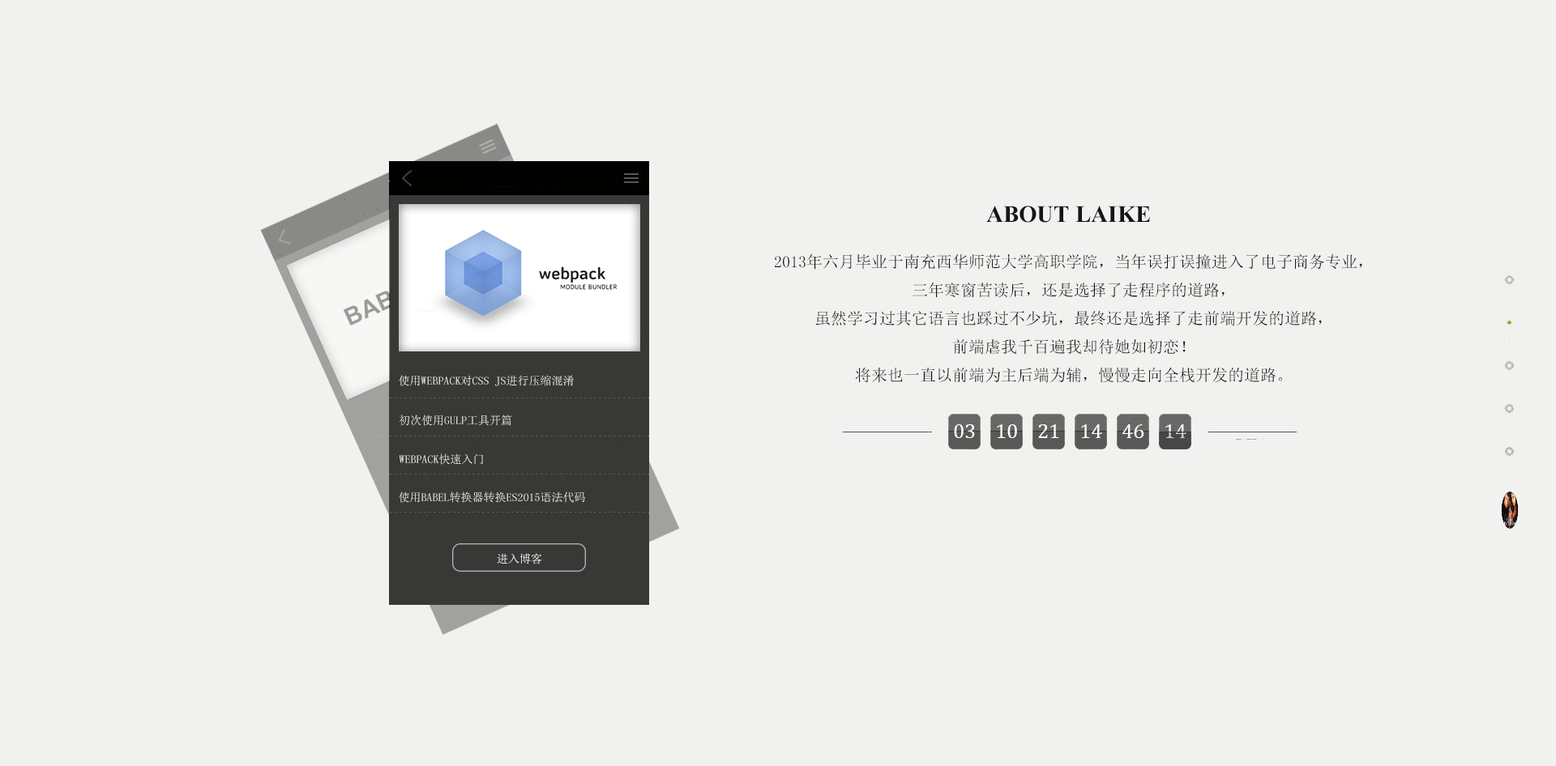
<style>
.page{position:relative;width:1556px;height:766px;background:#f1f1ef}
.page>*{position:absolute;margin:0}
.t1{font:29.2px "Aparajita-Bold";color:#161414;text-transform:uppercase}
.t2{font:16.2px "SimSun";color:#161414;text-transform:uppercase}
.t3{font:11.3px "SimSun";color:#f1f1ef;text-transform:uppercase}
.t4{font:11.3px "SimSun";color:#ffffff;text-transform:uppercase}
</style>
<div class="page">
<p class="t1" style="left:986px;top:206px;width:164px;height:17px">About Laike</p>
<p class="t2" style="left:775px;top:254px;width:587px;height:129px;text-align:center">2013年六月毕业于南充西华师范大学高职学院，当年误打误撞进入了电子商务专业，<br>三年寒窗苦读后，还是选择了走程序的道路，<br>虽然学习过其它语言也踩过不少坑，最终还是选择了走前端开发的道路，<br>前端虐我千百遍我却待她如初恋！<br>将来也一直以前端为主后端为辅，慢慢走向全栈开发的道路。</p>
<p class="t3" style="left:399px;top:375px;width:175px;height:11px">使用webpack对css js进行压缩混淆</p>
<p class="t3" style="left:399px;top:415px;width:113px;height:11px">初次使用gulp工具开篇</p>
<p class="t3" style="left:399px;top:454px;width:84px;height:11px">webpack快速入门</p>
<p class="t3" style="left:399px;top:492px;width:186px;height:11px">使用babel转换器转换es2015语法代码</p>
<p class="t4" style="left:497px;top:553px;width:45px;height:12px">进入博客</p>
</div>
